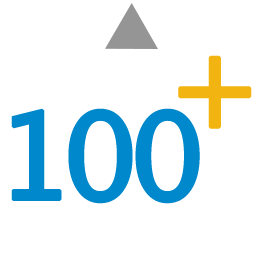
<style>
.page{position:relative;width:256px;height:256px;background:#ffffff}
.page>*{position:absolute;margin:0}
.t1{font:120px "LucidaGrande";letter-spacing:-0.1em;color:#f1b410;font-weight:bold}
.t2{font:120px "LucidaGrande";letter-spacing:-0.1em;color:#0088cc;font-weight:bold}
</style>
<div class="page">
<p class="t1" style="left:178px;top:55px;width:74px;height:74px">+</p>
<p class="t2" style="left:11px;top:108px;width:189px;height:96px">100</p>
</div>
